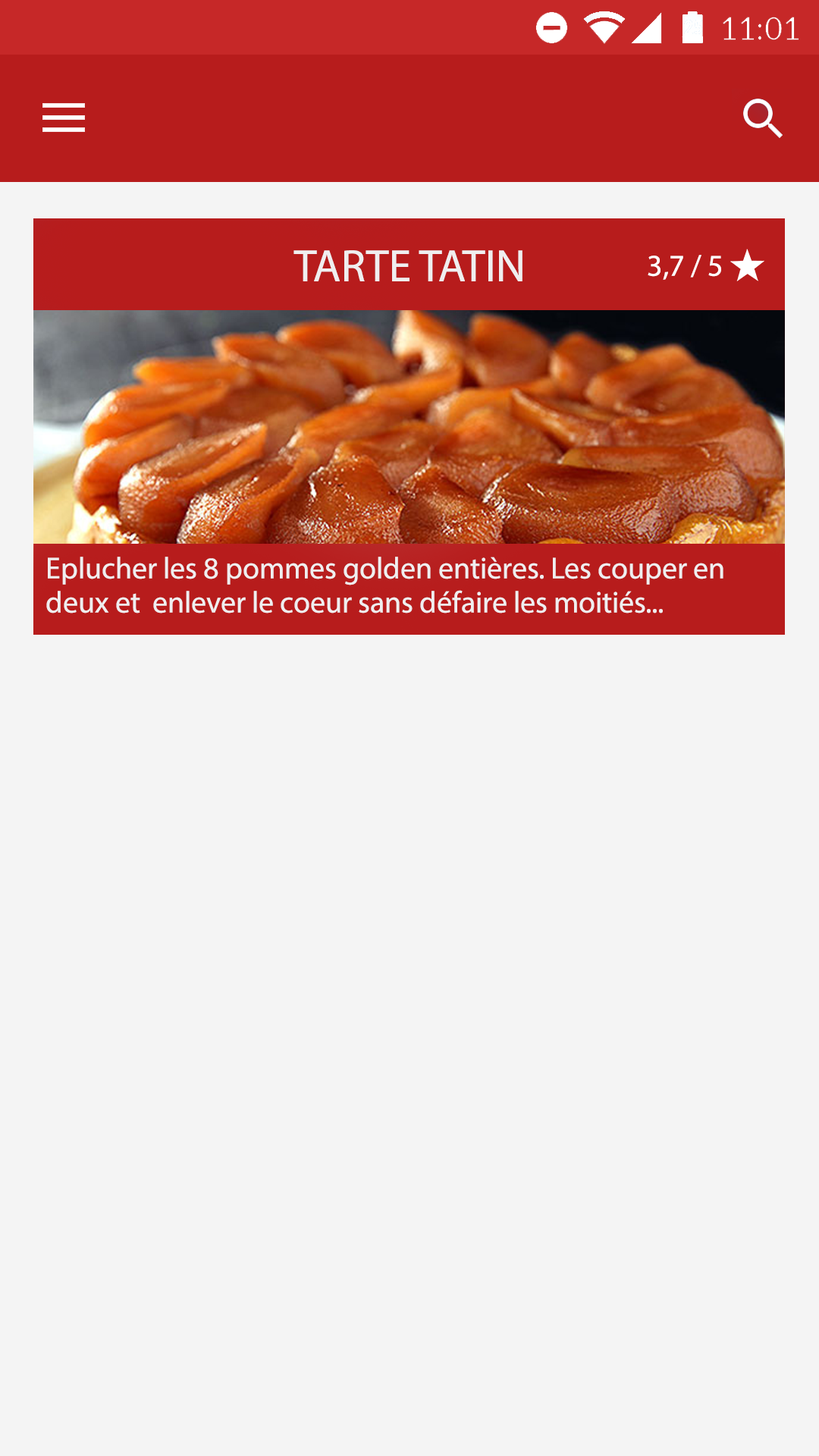
<style>
.page{position:relative;width:819px;height:1456px;background:#f4f4f4}
.page>*{position:absolute;margin:0}
.t1{font:45.5px "MyriadPro-Regular";color:#f0eeef}
.t2{font:30.3px "MyriadPro-Regular";color:#ffffff}
.t3{font:30.3px/6.8px "MyriadPro-Regular";color:#f0eeef}
</style>
<div class="page">
<p class="t1" style="left:293px;top:250px;width:229px;height:31px">TARTE TATIN</p>
<p class="t2" style="left:648px;top:255px;width:73px;height:25px">3,7 / 5</p>
<p class="t3" style="left:46px;top:557px;width:677px;height:56px">Eplucher les 8 pommes golden entières. Les couper en <br><br><br><br><br>deux et  enlever le coeur sans défaire les moitiés...</p>
</div>
